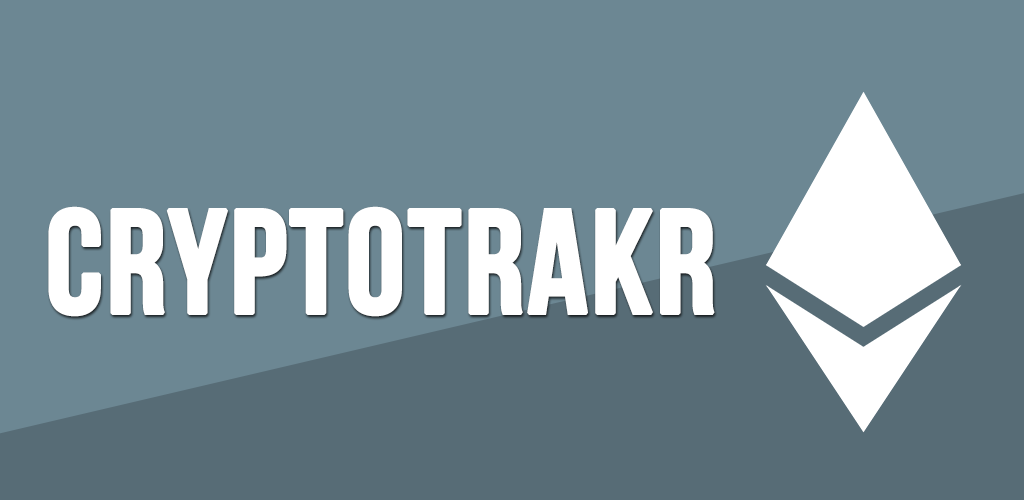
<style>
.page{position:relative;width:1024px;height:500px;background:#6c8793}
.page>*{position:absolute;margin:0}
.t1{font:147px "BebasNeue";color:#ffffff;font-weight:bold}
</style>
<div class="page">
<p class="t1" style="left:48px;top:206px;width:667px;height:111px">CryptoTrakr</p>
</div>
